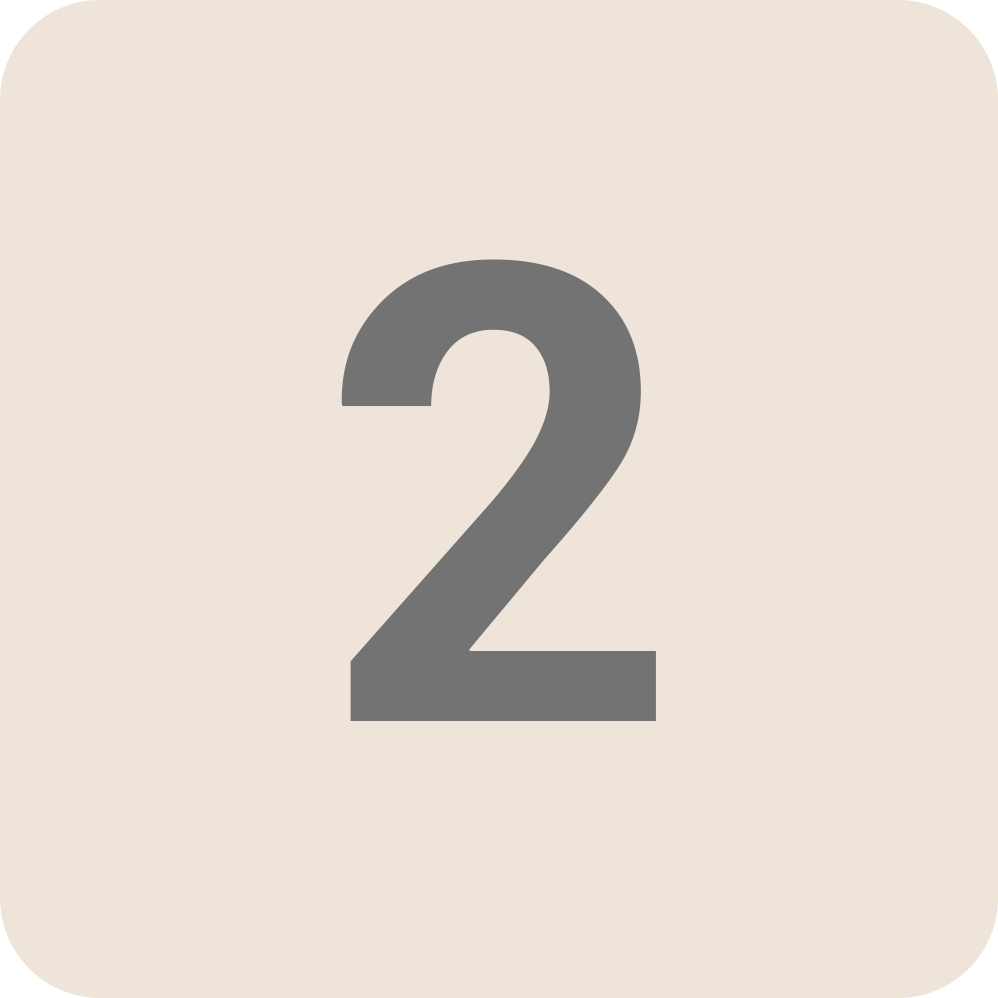
<style>
.page{position:relative;width:998px;height:998px;background:#eee4da}
.page>*{position:absolute;margin:0}
.t1{font:640px "Roboto-Bold";color:#737373}
</style>
<div class="page">
<p class="t1" style="left:341px;top:259px;width:315px;height:462px">2</p>
</div>
